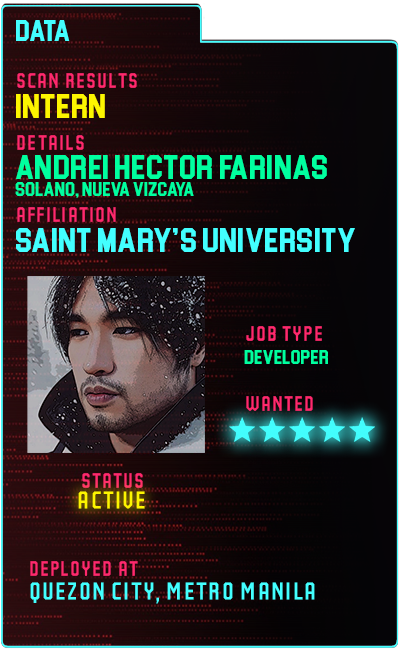
<style>
.page{position:relative;width:400px;height:650px}
.page>*{position:absolute;margin:0}
.t1{font:30px "Blockletter";color:#43ffff}
.t2{font:35px "Party-Lights-[WLM]-Flat";color:#ff296d}
.t3{font:35px "Blockletter";color:#fdf500}
.t4{font:35px "Blockletter";color:#00ff9f}
.t5{font:20px "Blockletter";color:#00ff9f}
.t6{font:35px "Blockletter";color:#43ffff}
.t7{font:42px "Party-Lights-[WLM]-Flat";color:#fdf500}
.t8{font:42px "Party-Lights-[WLM]-Flat";color:#43ffff}
</style>
<div class="page">
<p class="t1" style="left:16px;top:20px;width:54px;height:21px">DATA</p>
<p class="t2" style="left:17px;top:73px;width:120px;height:15px">Scan REsults</p>
<p class="t3" style="left:16px;top:94px;width:89px;height:24px">Intern</p>
<p class="t2" style="left:17px;top:135px;width:67px;height:15px">details</p>
<p class="t4" style="left:16px;top:155px;width:311px;height:24px">Andrei hector farinas</p>
<p class="t5" style="left:15px;top:182px;width:179px;height:16px">solano, nueva vizcaya</p>
<p class="t2" style="left:17px;top:207px;width:99px;height:15px">AFFILIATION</p>
<p class="t6" style="left:16px;top:228px;width:339px;height:24px">saint mary’s university</p>
<p class="t2" style="left:246px;top:326px;width:76px;height:15px">job type</p>
<p class="t5" style="left:244px;top:350px;width:84px;height:14px">developer</p>
<p class="t2" style="left:246px;top:396px;width:67px;height:15px">wanted</p>
<p class="t2" style="left:82px;top:473px;width:61px;height:15px">status</p>
<p class="t7" style="left:78px;top:491px;width:67px;height:18px">Active</p>
<p class="t2" style="left:30px;top:561px;width:108px;height:15px">deployed at</p>
<p class="t8" style="left:30px;top:582px;width:285px;height:22px">quezon city, Metro manila</p>
</div>
